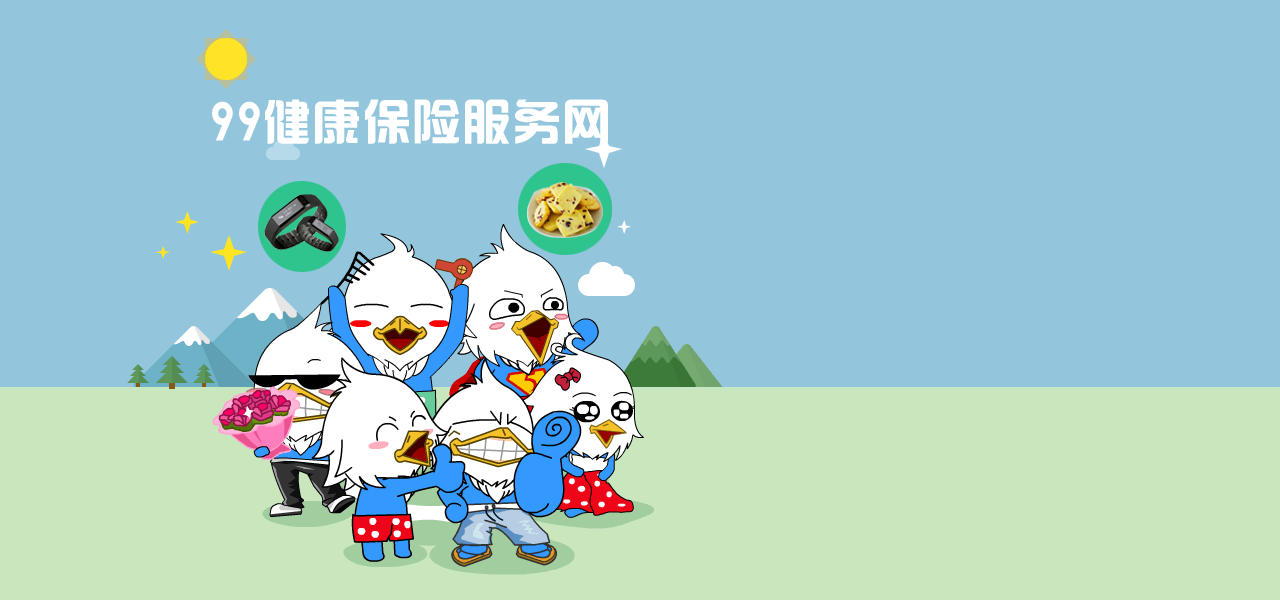
<style>
.page{position:relative;width:1280px;height:600px;background:#93c6dd}
.page>*{position:absolute;margin:0}
.t1{font:48px "¹ã½Ý¾ÓÃÔÄã×Ö¿â";letter-spacing:0.04em;color:#ffffff}
</style>
<div class="page">
<p class="t1" style="left:212px;top:99px;width:396px;height:45px">99健康保险服务网</p>
</div>
